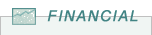
<style>
.page{position:relative;width:152px;height:35px;background:#f0f5f3}
.page>*{position:absolute;margin:0}
.t1{font:15px "Arial-ItalicMT";letter-spacing:0.075em;color:#428484;font-weight:bold}
</style>
<div class="page">
<p class="t1" style="left:47px;top:10px;width:91px;height:12px">FINANCIAL</p>
</div>
